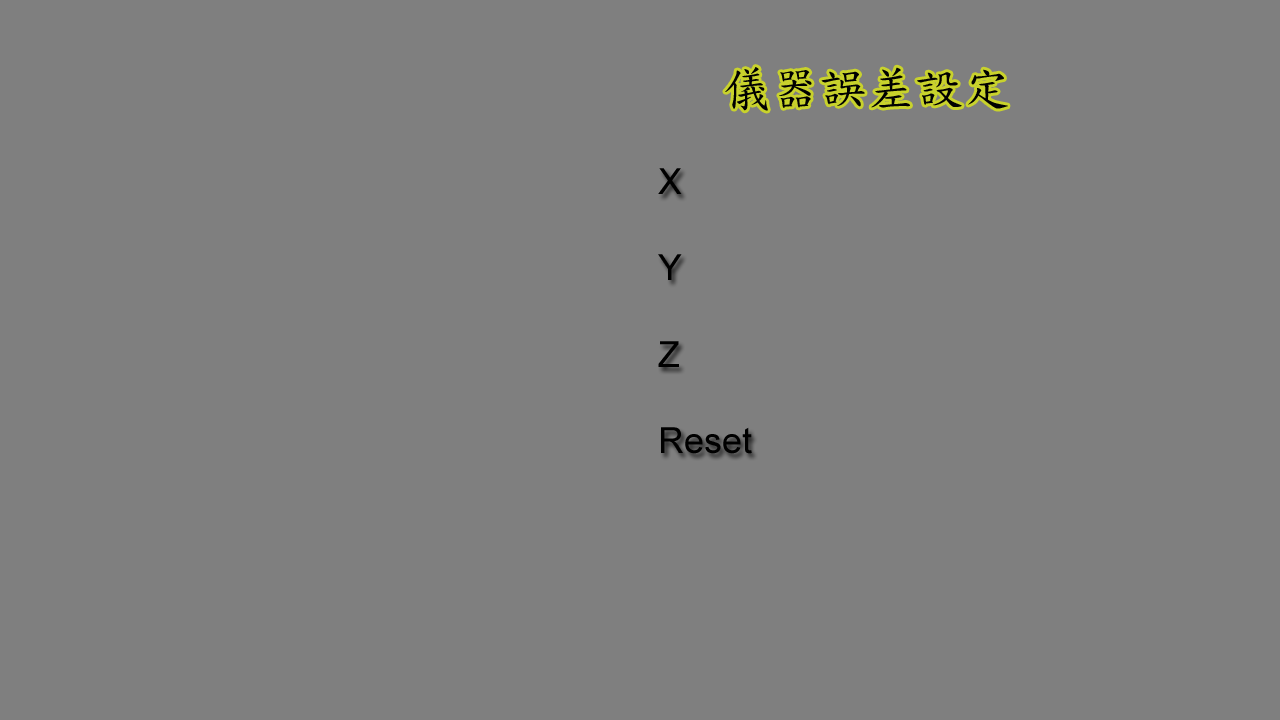
<style>
.page{position:relative;width:1280px;height:720px;background:#7f7f7f}
.page>*{position:absolute;margin:0}
.t1{font:48px "DFKaiShu-SB-Estd-BF";color:#000000}
.t2{font:30px "ArialMT";color:#000000}
.t3{font:36px "ArialMT";color:#000000}
</style>
<div class="page">
<p class="t1" style="left:725px;top:67px;width:283px;height:44px"><span class="t2">        </span>儀器誤差設定</p>
<p class="t3" style="left:658px;top:168px;width:94px;height:286px">X    <br><br>Y        <br><br>Z   <br><br>Reset</p>
</div>
